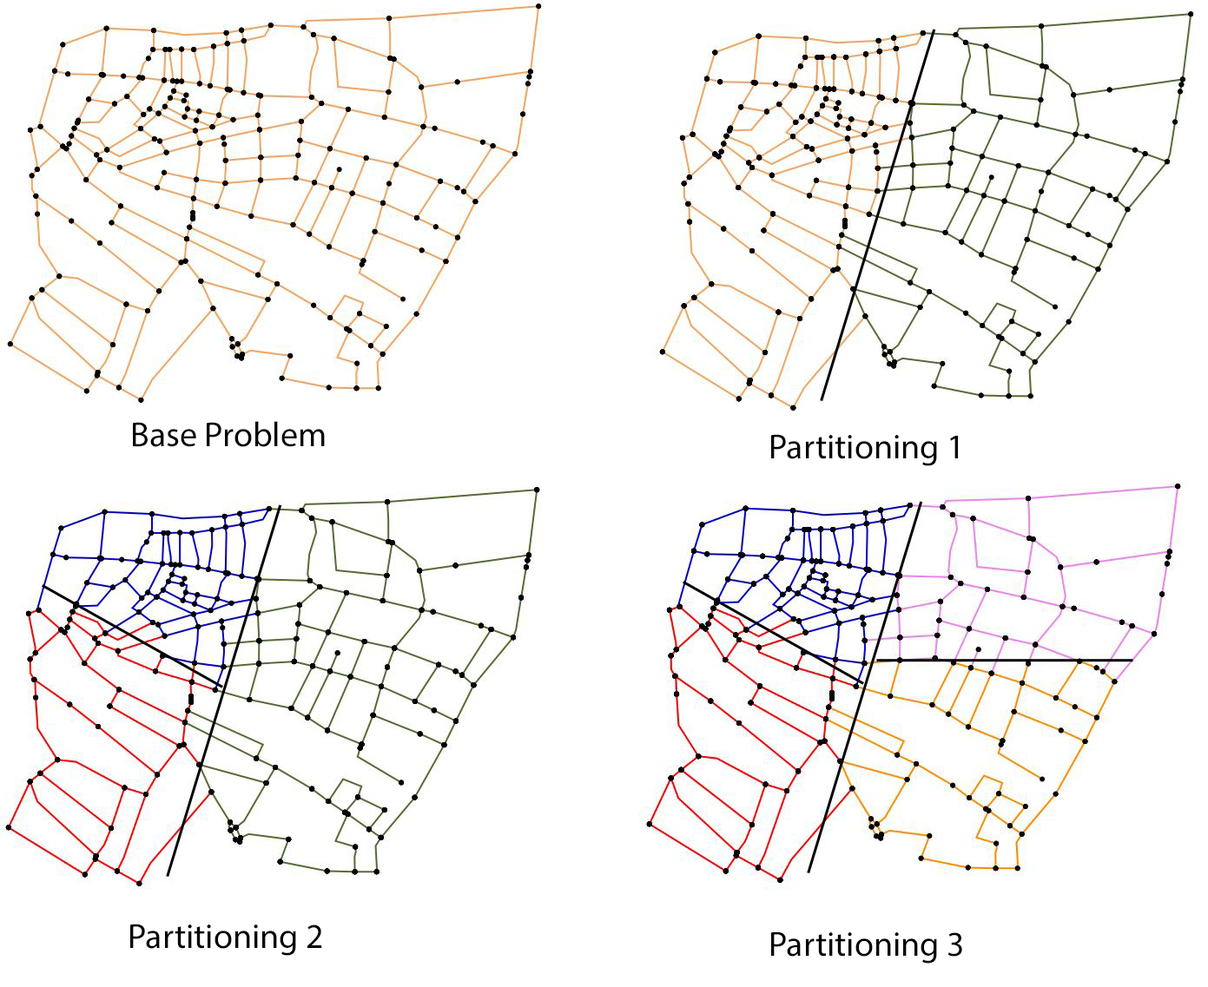
<style>
.page{position:relative;width:1208px;height:987px;background:#ffffff}
.page>*{position:absolute;margin:0}
.t1{font:34.7px "MyriadPro-Regular";color:#000000}
</style>
<div class="page">
<p class="t1" style="left:133px;top:421px;width:192px;height:26px">Base Problem</p>
<p class="t1" style="left:771px;top:434px;width:187px;height:32px">Partitioning 1</p>
<p class="t1" style="left:130px;top:924px;width:192px;height:32px">Partitioning 2</p>
<p class="t1" style="left:771px;top:932px;width:191px;height:32px">Partitioning 3</p>
</div>
